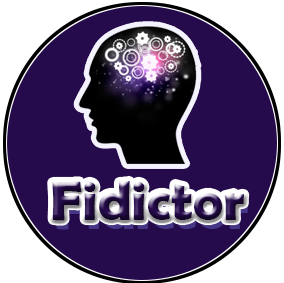
<style>
.page{position:relative;width:284px;height:283px;background:#250b4b}
.page>*{position:absolute;margin:0}
.t1{font:56.3px "BerlinSansFBDemi-Bold"}
</style>
<div class="page">
<p class="t1" style="left:52px;top:181px;width:193px;height:40px">Fidictor</p>
</div>
